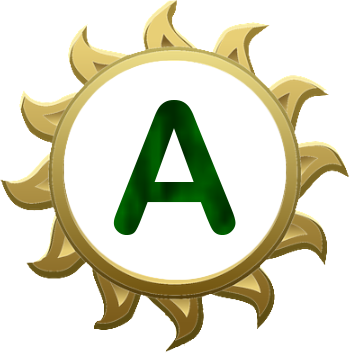
<style>
.page{position:relative;width:349px;height:353px;background:#ffffff}
.page>*{position:absolute;margin:0}
.t1{font:183.3px "ArialRoundedMTBold";color:#004800}
</style>
<div class="page">
<p class="t1" style="left:113px;top:100px;width:123px;height:135px">A</p>
</div>
